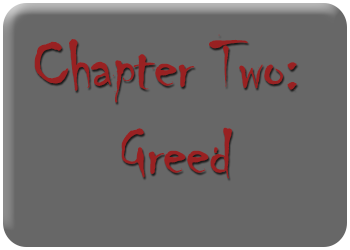
<style>
.page{position:relative;width:350px;height:250px;background:#676767}
.page>*{position:absolute;margin:0}
.t1{font:72.2px "Chiller-Regular";letter-spacing:-0.025em;color:#992122}
</style>
<div class="page">
<p class="t1" style="left:34px;top:34px;width:263px;height:145px;text-align:center">Chapter Two: <br>Greed</p>
</div>
